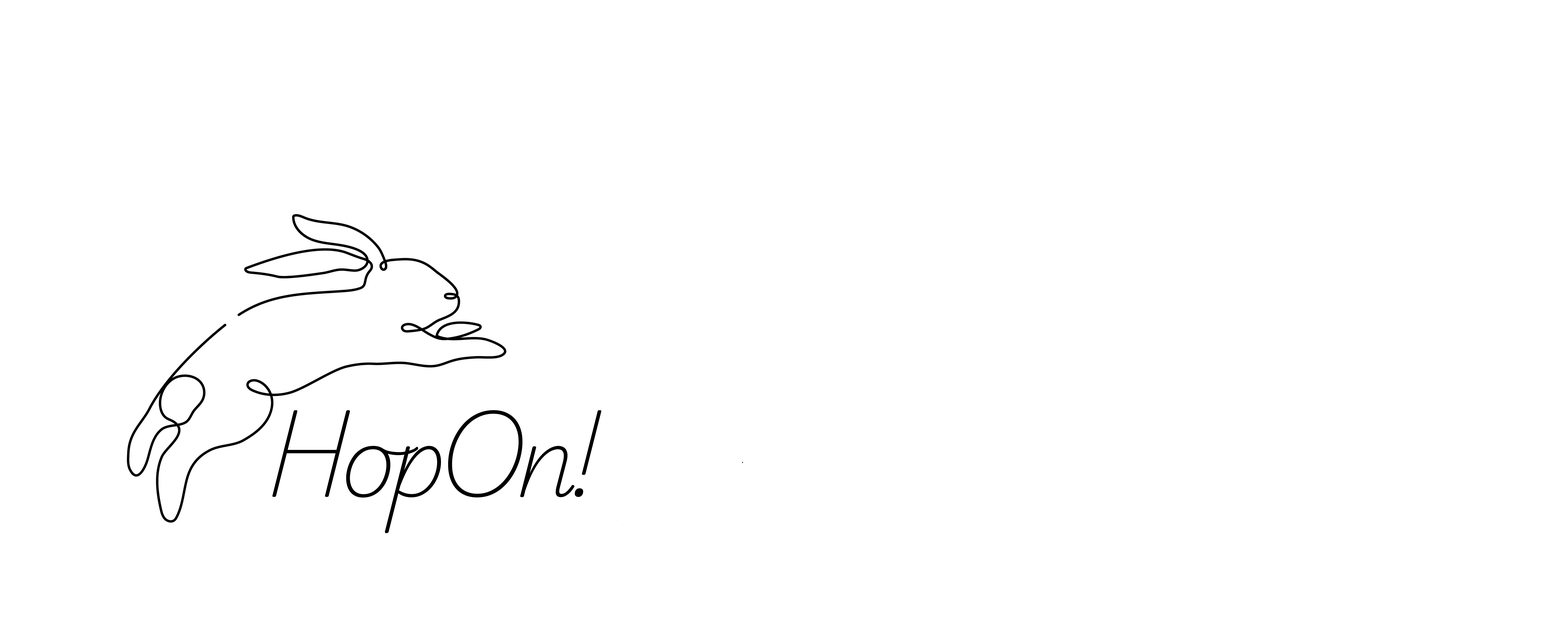
<style>
.page{position:relative;width:1568px;height:627px;background:#ffffff}
.page>*{position:absolute;margin:0}
.t1{font:96px "PlaywriteIS-Thin";letter-spacing:-0.1em;color:#000000}
</style>
<div class="page">
<p class="t1" style="left:272px;top:410px;width:329px;height:124px">HopOn!</p>
</div>
